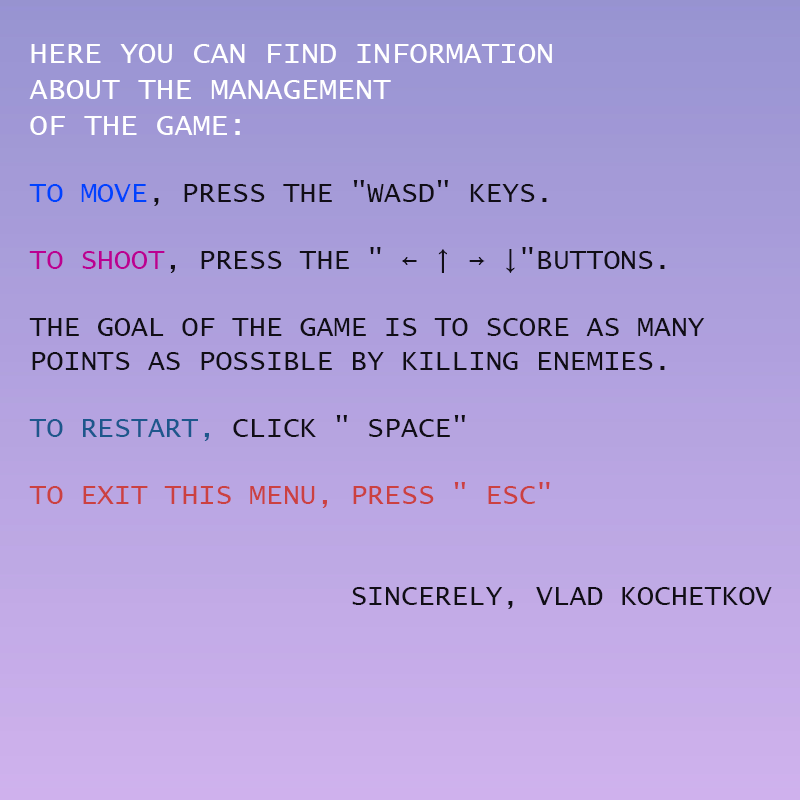
<style>
.page{position:relative;width:800px;height:800px}
.page>*{position:absolute;margin:0}
.t1{font:28px "LucidaConsole";color:#110e16;text-transform:uppercase}
.t2{font:30px "LucidaConsole";color:#ffffff;text-transform:uppercase}
.t3{font:28px "LucidaConsole";color:#0042ff;text-transform:uppercase}
.t4{font:28px "LucidaConsole";color:#bb0091;text-transform:uppercase}
.t5{font:28px "LucidaConsole";color:#1d578c;text-transform:uppercase}
.t6{font:28px "LucidaConsole";color:#cb4141;text-transform:uppercase}
</style>
<div class="page">
<p class="t1" style="left:29px;top:44px;width:743px;height:565px;text-align:right"><span class="t2">Here you can find information <br>about the management <br>of the game:<br><br></span><span class="t3">To move</span>, press the "WASD" keys.<br><br><span class="t4">To shoot</span>, press the " ← ↑ → ↓"buttons.<br><br>The goal of the game is to score as many <br>points as possible by killing enemies.<br><br><span class="t5">To restart,</span> click " space"<br><br><span class="t6">To exit this menu, press " Esc"<br></span><br><br>                   Sincerely, Vlad Kochetkov</p>
</div>
